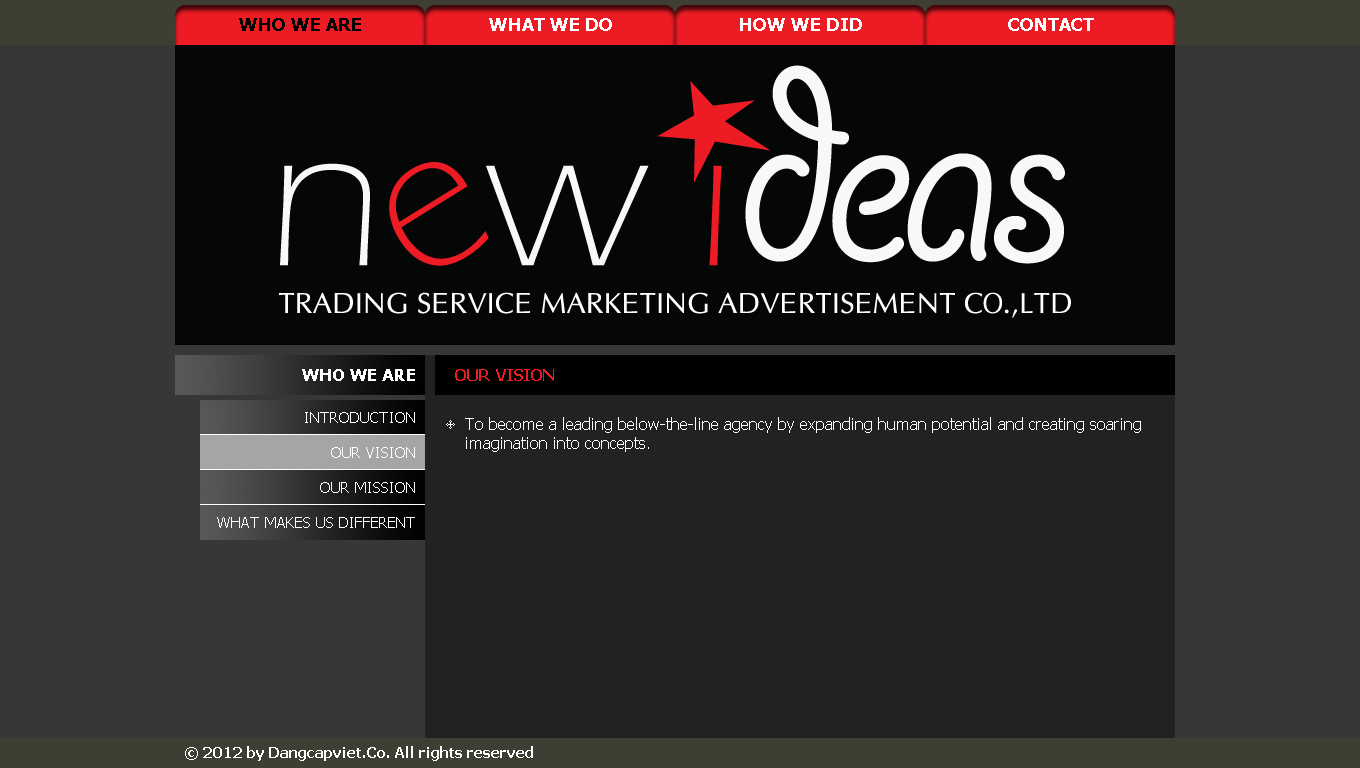
<style>
.page{position:relative;width:1360px;height:768px;background:#383636}
.page>*{position:absolute;margin:0}
.t1{font:18px "Tahoma-Bold";color:#000000}
.t2{font:18px "Tahoma-Bold";color:#ffffff}
.t3{font:17px "Tahoma-Bold";color:#ffffff}
.t4{font:16px "Tahoma-Bold";color:#ed1c24}
.t5{font:15px "Tahoma";color:#ffffff}
.t6{font:16px "Tahoma";color:#ffffff}
.t7{font:15px "Tahoma-Bold";color:#ffffff}
</style>
<div class="page">
<p class="t1" style="left:239px;top:18px;width:122px;height:13px">WHO WE ARE</p>
<p class="t2" style="left:489px;top:18px;width:123px;height:13px">WHAT WE DO</p>
<p class="t2" style="left:740px;top:18px;width:122px;height:13px">HOW WE DID</p>
<p class="t2" style="left:1008px;top:18px;width:86px;height:13px">CONTACT</p>
<p class="t3" style="left:302px;top:369px;width:113px;height:12px">WHO WE ARE</p>
<p class="t4" style="left:455px;top:369px;width:99px;height:12px">OUR VISION</p>
<p class="t5" style="left:305px;top:412px;width:110px;height:11px">INTRODUCTION</p>
<p class="t6" style="left:465px;top:417px;width:676px;height:35px">To become a leading below-the-line agency by expanding human potential and creating soaring imagination into concepts.</p>
<p class="t5" style="left:331px;top:447px;width:84px;height:11px">OUR VISION</p>
<p class="t5" style="left:320px;top:482px;width:95px;height:11px">OUR MISSION</p>
<p class="t5" style="left:217px;top:517px;width:198px;height:11px">WHAT MAKES US DIFFERENT</p>
<p class="t7" style="left:185px;top:746px;width:348px;height:15px">© 2012 by Dangcapviet.Co. All rights reserved</p>
</div>
